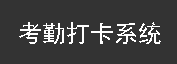
<style>
.page{position:relative;width:177px;height:64px;background:#333333}
.page>*{position:absolute;margin:0}
.t1{font:24px "SimHei";color:#ffffff}
</style>
<div class="page">
<p class="t1" style="left:19px;top:22px;width:142px;height:22px">考勤打卡系统</p>
</div>
